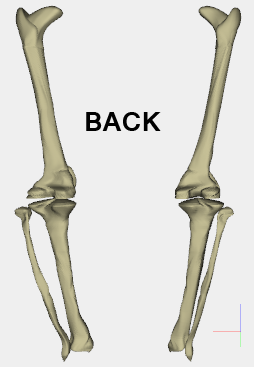
<style>
.page{position:relative;width:254px;height:367px;background:#efefef}
.page>*{position:absolute;margin:0}
.t1{font:30px "Raavi";color:#010101}
</style>
<div class="page">
<p class="t1" style="left:86px;top:112px;width:75px;height:19px">BACK</p>
</div>
